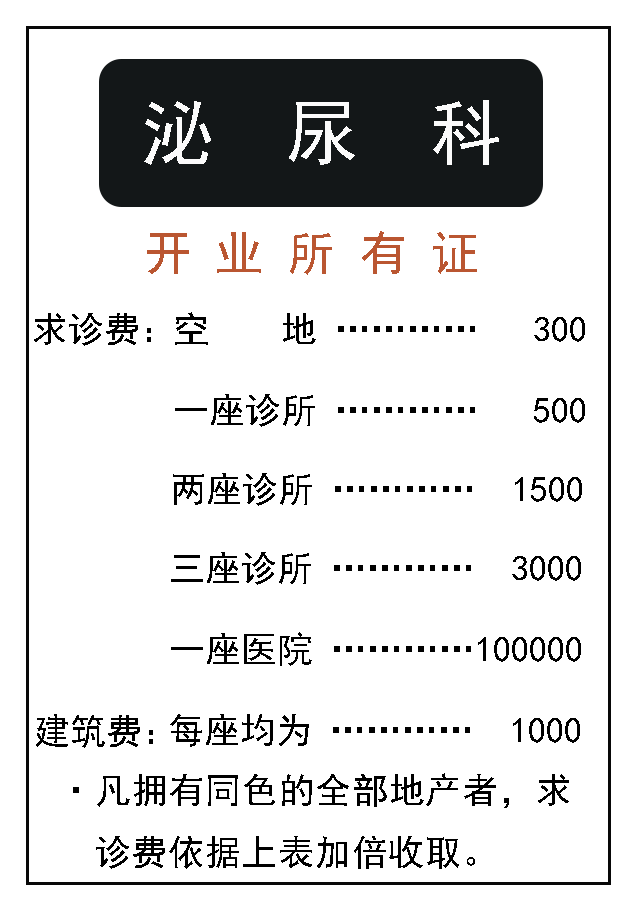
<style>
.page{position:relative;width:638px;height:908px;background:#ffffff}
.page>*{position:absolute;margin:0}
.t1{font:72px "SimHei";color:#fbfbfb}
.t2{font:48px "SimHei";color:#ba5631}
.t3{font:36px "SimHei";color:#000000}
.t4{font:36px/28px "SimHei";letter-spacing:0.02em;color:#000000}
</style>
<div class="page">
<p class="t1" style="left:144px;top:100px;width:355px;height:65px">泌  尿  科</p>
<p class="t2" style="left:147px;top:231px;width:330px;height:44px">开 业 所 有 证</p>
<p class="t3" style="left:34px;top:313px;width:117px;height:33px">求诊费：</p>
<p class="t3" style="left:175px;top:312px;width:410px;height:33px">空    地 …………   300</p>
<p class="t3" style="left:175px;top:394px;width:410px;height:33px">一座诊所 …………   500</p>
<p class="t3" style="left:173px;top:473px;width:409px;height:33px">两座诊所 …………  1500</p>
<p class="t3" style="left:171px;top:552px;width:410px;height:33px">三座诊所 …………  3000</p>
<p class="t3" style="left:171px;top:632px;width:410px;height:34px">一座医院 …………100000</p>
<p class="t3" style="left:36px;top:714px;width:117px;height:34px">建筑费：</p>
<p class="t3" style="left:170px;top:714px;width:410px;height:33px">每座均为 …………  1000</p>
<p class="t4" style="left:73px;top:773px;width:496px;height:96px;text-align:center">·凡拥有同色的全部地产者，求<br><br>诊费依据上表加倍收取。</p>
</div>
